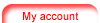
<style>
.page{position:relative;width:100px;height:23px;background:#ffffff}
.page>*{position:absolute;margin:0}
.t1{font:11px "ArialMT";color:#fe0202}
</style>
<div class="page">
<p class="t1" style="left:23px;top:12px;width:56px;height:11px">My account</p>
</div>
